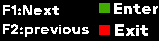
<style>
.page{position:relative;width:159px;height:41px;background:#000000}
.page>*{position:absolute;margin:0}
.t1{font:13.7px "Kalameh-ExtraBold";letter-spacing:0.01em;color:#ffffff;scale:1.12 1}
.t2{font:15.2px "Kalameh-ExtraBold";letter-spacing:0.01em;color:#ffffff;scale:1.12 1}
.t3{font:13.7px "Kalameh-Bold";letter-spacing:0.01em;color:#ffffff;scale:1.12 1}
.t4{font:16px "Kalameh-ExtraBold";letter-spacing:0.01em;color:#ffffff;scale:1.13 1}
</style>
<div class="page">
<p class="t1" style="left:3px;top:5px;width:56px;height:10px">F1:Next</p>
<p class="t2" style="left:114px;top:3px;width:44px;height:11px">Enter</p>
<p class="t3" style="left:3px;top:24px;width:86px;height:13px">F2:previous</p>
<p class="t4" style="left:115px;top:24px;width:33px;height:12px">Exit</p>
</div>
